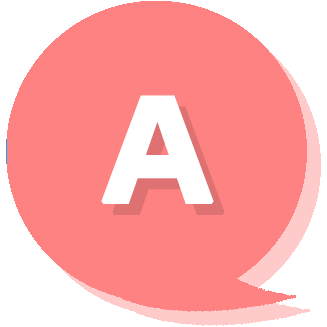
<style>
.page{position:relative;width:327px;height:327px;background:#ff8282}
.page>*{position:absolute;margin:0}
.t1{font:150px "AlibabaPuHuiTi-Bold";letter-spacing:-0.024em;color:#ffffff;font-weight:bold}
</style>
<div class="page">
<p class="t1" style="left:101px;top:95px;width:113px;height:109px">A</p>
</div>
